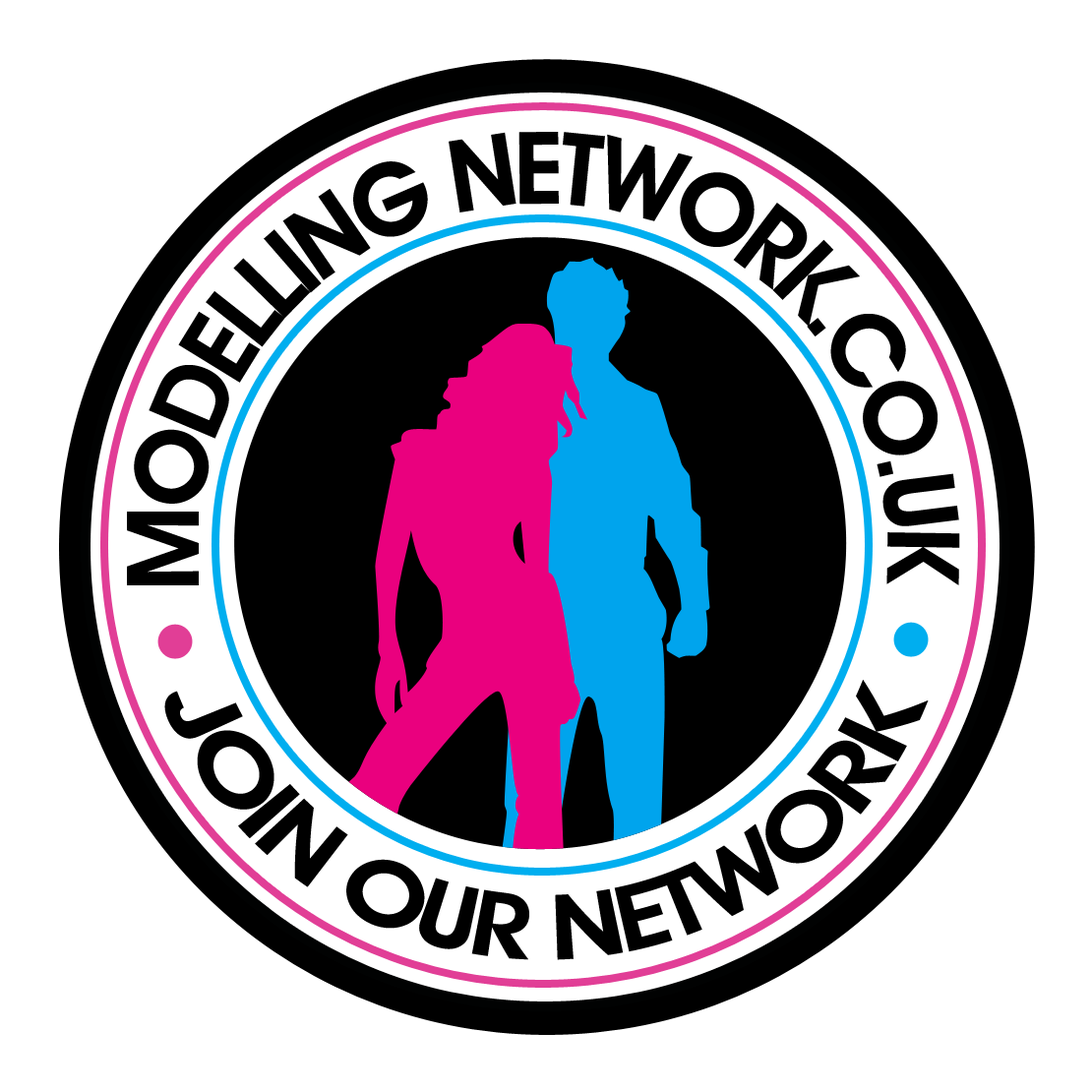
<style>
.page{position:relative;width:1092px;height:1092px;background:#ffffff}
.page>*{position:absolute;margin:0}
.t1{font:100.7px "AvantGardeITCbyBT-Demi";letter-spacing:-0.08em;color:#000000;text-transform:uppercase}
.t2{font:77.4px "AvantGardeITCbyBT-Demi";letter-spacing:-0.06em;color:#000000;text-transform:uppercase}
</style>
<div class="page">
<p class="t1" style="left:127px;top:132px;width:833px;height:453px;text-align:center">Modelling Network.co.uk</p>
<p class="t2" style="left:164px;top:680px;width:765px;height:280px;text-align:center">Join Our Network</p>
</div>
